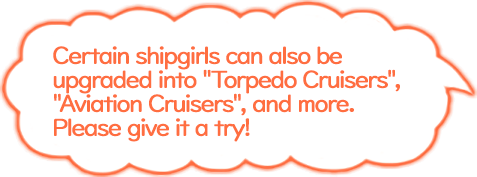
<style>
.page{position:relative;width:477px;height:177px;background:#ffffff}
.page>*{position:absolute;margin:0}
.t1{font:24px/24px "UDDigiKyokashoNP-R";letter-spacing:-0.08em;color:#ff6e40;font-weight:bold}
</style>
<div class="page">
<p class="t1" style="left:53px;top:46px;width:347px;height:96px">Certain shipgirls can also be<br>upgraded into "Torpedo Cruisers",<br>"Aviation Cruisers", and more.<br>Please give it a try!</p>
</div>
